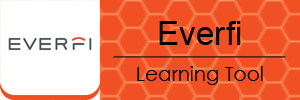
<style>
.page{position:relative;width:300px;height:100px;background:#f05023}
.page>*{position:absolute;margin:0}
.t1{font:33.3px "ArialMT";color:#000000}
.t2{font:20px "CenturyGothic";color:#000000}
</style>
<div class="page">
<p class="t1" style="left:159px;top:21px;width:82px;height:24px">Everfi</p>
<p class="t2" style="left:137px;top:66px;width:126px;height:19px">Learning Tool</p>
</div>
